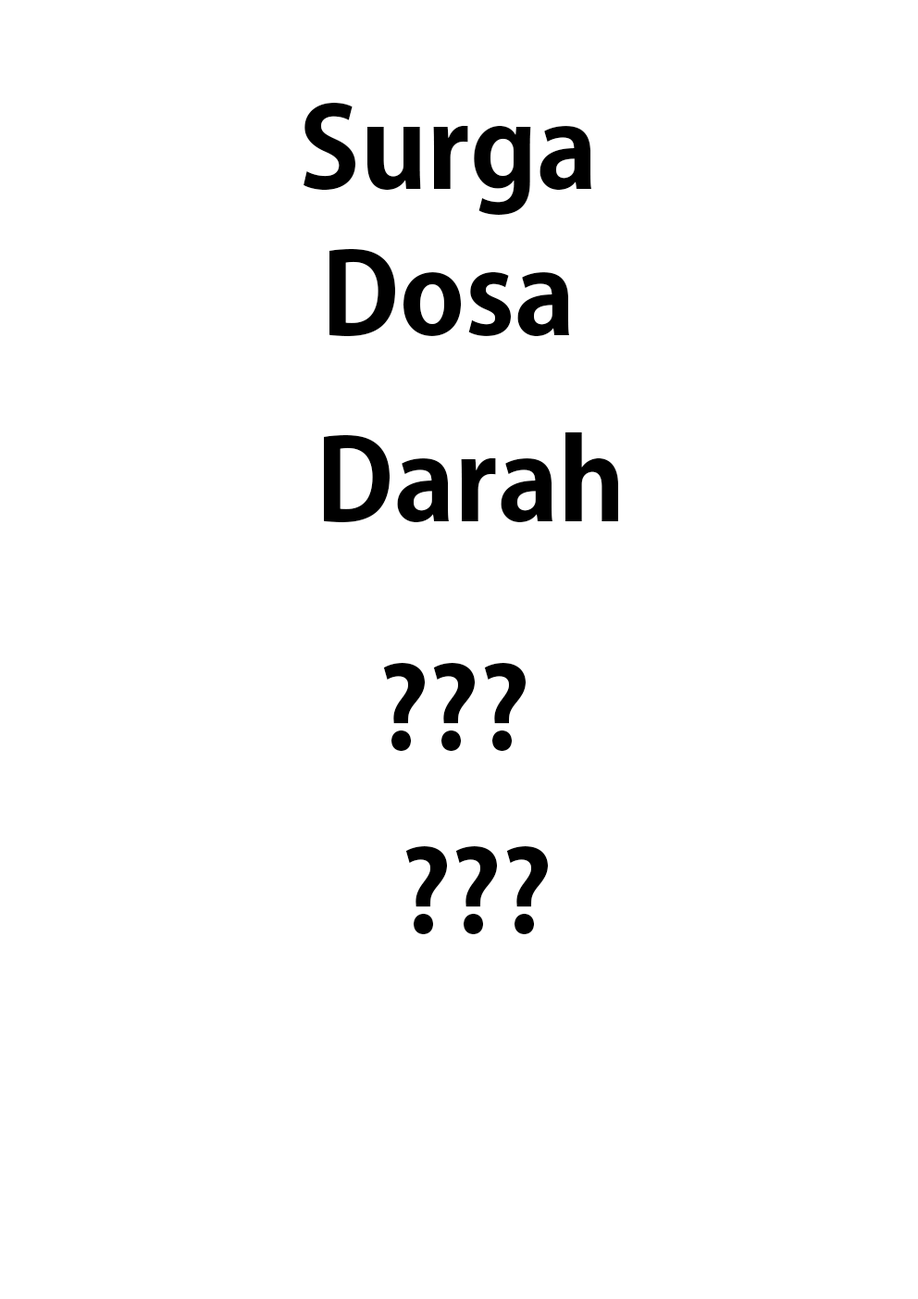
<style>
.page{position:relative;width:918px;height:1299px;background:#ffffff}
.page>*{position:absolute;margin:0}
.t1{font:111.1px "AdobeGothicStd-Bold";color:#000000}
</style>
<div class="page">
<p class="t1" style="left:304px;top:103px;width:287px;height:112px">Surga</p>
<p class="t1" style="left:330px;top:248px;width:239px;height:89px">Dosa</p>
<p class="t1" style="left:324px;top:432px;width:294px;height:91px">Darah</p>
<p class="t1" style="left:383px;top:663px;width:143px;height:88px">???</p>
<p class="t1" style="left:405px;top:846px;width:143px;height:88px">???</p>
</div>
